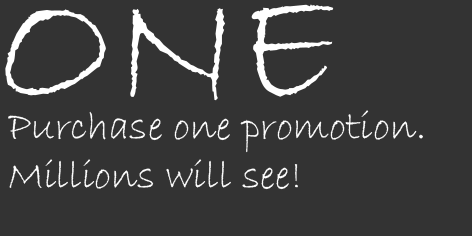
<style>
.page{position:relative;width:472px;height:236px;background:#333333}
.page>*{position:absolute;margin:0}
.t1{font:166.7px "BradleyHandITC";color:#ffffff}
.t2{font:41.7px "BradleyHandITC";color:#ffffff}
</style>
<div class="page">
<p class="t1" style="left:5px;top:4px;width:329px;height:97px">ONE</p>
<p class="t2" style="left:8px;top:110px;width:415px;height:80px">Purchase one promotion.<br>Millions will see!</p>
</div>
